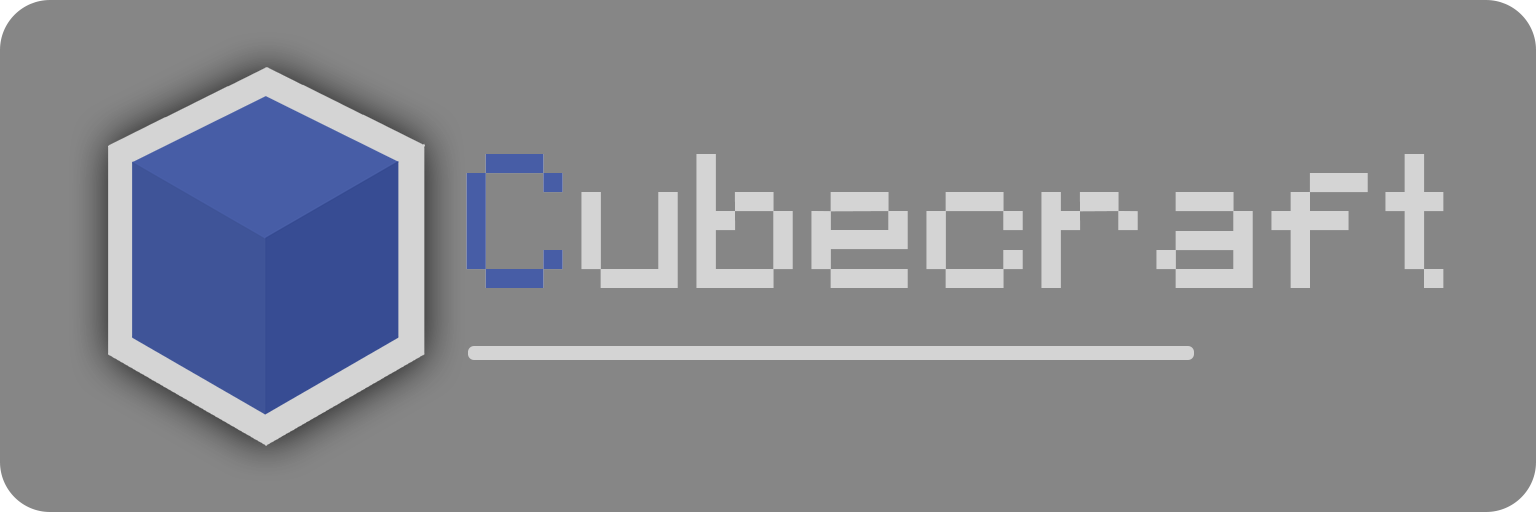
<style>
.page{position:relative;width:1536px;height:512px;background:#868686}
.page>*{position:absolute;margin:0}
.t1{font:191.6px "Mojangles";color:#d4d4d4}
.t2{font:191.6px "Mojangles";color:#475da6}
</style>
<div class="page">
<p class="t1" style="left:466px;top:154px;width:978px;height:134px">Cubecraft</p>
<p class="t2" style="left:466px;top:154px;width:97px;height:134px">C</p>
</div>
